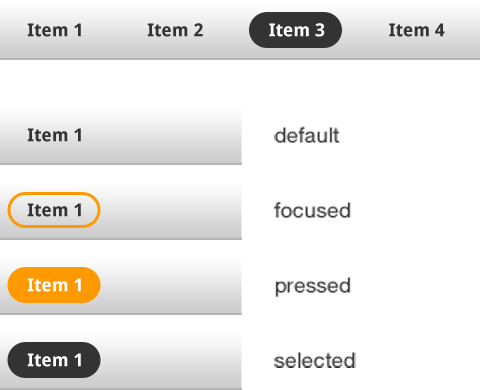
<style>
.page{position:relative;width:480px;height:390px;background:#ffffff}
.page>*{position:absolute;margin:0}
.t1{font:18px "DroidSans-Bold";color:#333333}
.t2{font:18px "DroidSans-Bold";color:#ffffff}
.t3{font:21px/75px "HelveticaNeue-Roman";color:#333333}
</style>
<div class="page">
<p class="t1" style="left:27px;top:23px;width:54px;height:14px">Item 1</p>
<p class="t1" style="left:147px;top:23px;width:56px;height:14px">Item 2</p>
<p class="t2" style="left:269px;top:23px;width:56px;height:14px">Item 3</p>
<p class="t1" style="left:389px;top:23px;width:56px;height:14px">Item 4</p>
<p class="t3" style="left:274px;top:126px;width:82px;height:242px">default<br>focused<br>pressed<br>selected</p>
<p class="t1" style="left:27px;top:128px;width:54px;height:14px">Item 1</p>
<p class="t1" style="left:27px;top:203px;width:54px;height:14px">Item 1</p>
<p class="t2" style="left:27px;top:278px;width:54px;height:14px">Item 1</p>
<p class="t2" style="left:27px;top:353px;width:54px;height:14px">Item 1</p>
</div>
